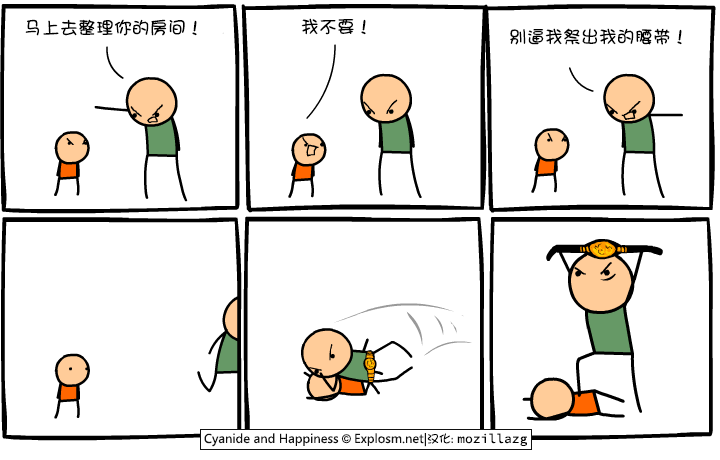
<style>
.page{position:relative;width:720px;height:460px;background:#ffffff}
.page>*{position:absolute;margin:0}
.t1{font:18px "DFGirl";color:#000000}
</style>
<div class="page">
<p class="t1" style="left:25px;top:19px;width:172px;height:17px">马上去整理你的房间！</p>
<p class="t1" style="left:301px;top:18px;width:65px;height:17px">我不要！</p>
<p class="t1" style="left:510px;top:28px;width:172px;height:17px">别逼我祭出我的腰带！</p>
</div>
